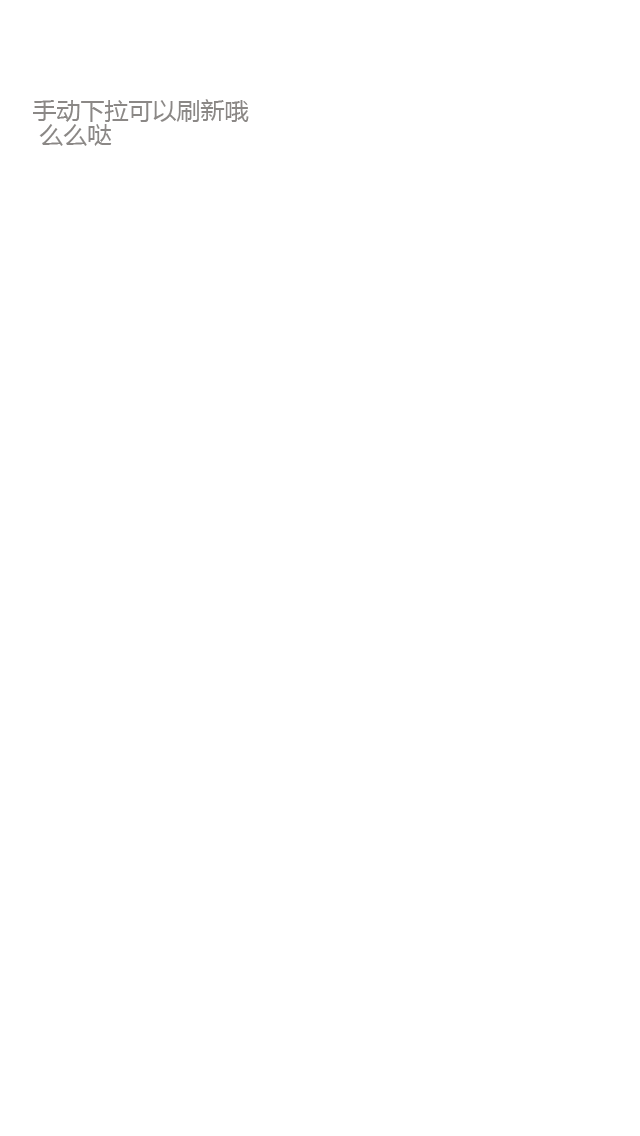
<style>
.page{position:relative;width:640px;height:1136px;background:#ffffff}
.page>*{position:absolute;margin:0}
.t1{font:24px/24px "MicrosoftYaHei";color:#8b8886}
</style>
<div class="page">
<p class="t1" style="left:33px;top:99px;width:216px;height:47px">手动下拉可以刷新哦<br> 么么哒</p>
</div>
